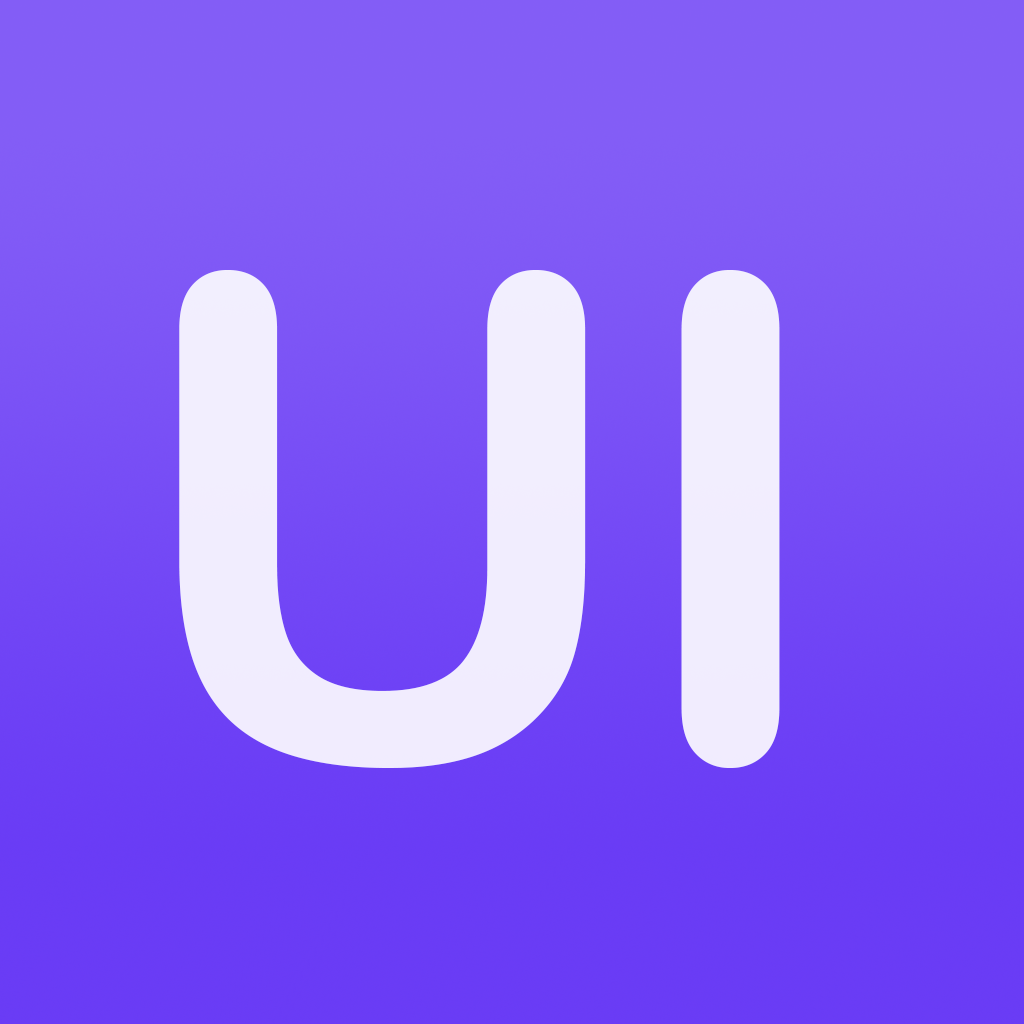
<style>
.page{position:relative;width:1024px;height:1024px}
.page>*{position:absolute;margin:0}
.t1{font:673px "ArialRoundedMTBold";letter-spacing:-0.02em;color:#ffffff}
</style>
<div class="page">
<p class="t1" style="left:179px;top:270px;width:601px;height:498px">UI</p>
</div>
